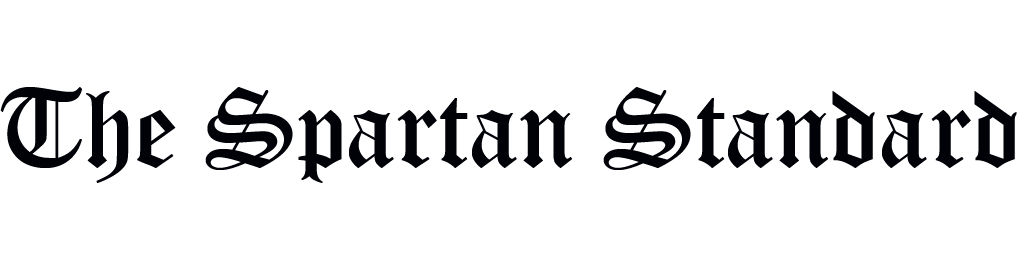
<style>
.page{position:relative;width:1024px;height:270px;background:#ffffff}
.page>*{position:absolute;margin:0}
.t1{font:110px "OldEnglishTextMT";color:#010208}
</style>
<div class="page">
<p class="t1" style="left:0px;top:87px;width:1017px;height:96px">The Spartan Standard</p>
</div>
